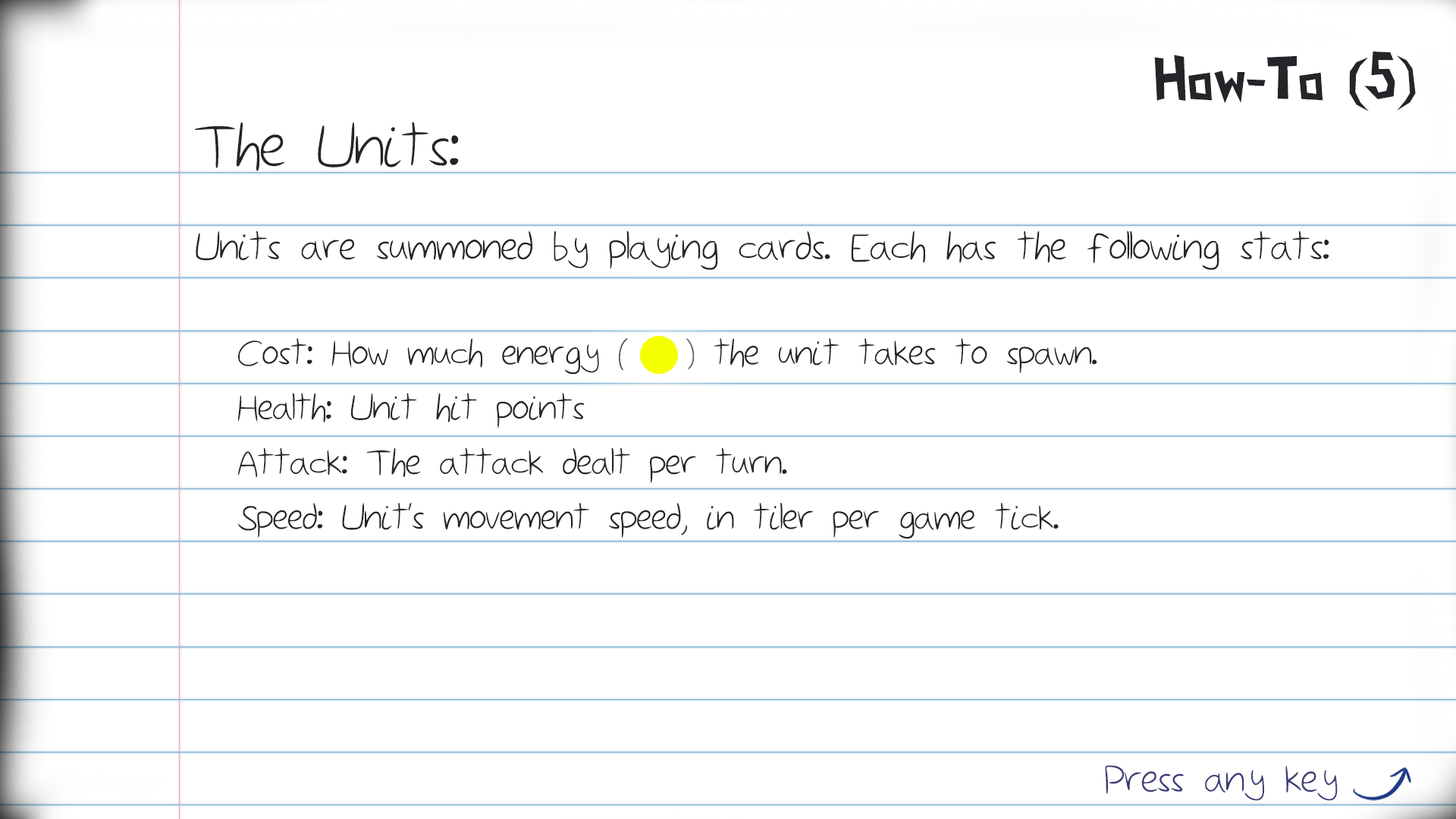
<style>
.page{position:relative;width:1456px;height:819px;background:#ffffff}
.page>*{position:absolute;margin:0}
.t1{font:59.4px "PaperCuts2";color:#242429}
.t2{font:76.9px "Sketchbook";color:#242429}
.t3{font:49.5px "Sketchbook";color:#242429}
.t4{font:45.7px "Sketchbook";color:#242429}
.t5{font:49.5px "Sketchbook";color:#3d3d78}
</style>
<div class="page">
<p class="t1" style="left:1154px;top:52px;width:262px;height:59px">How-To (5)</p>
<p class="t2" style="left:194px;top:122px;width:265px;height:49px">The Units:</p>
<p class="t3" style="left:196px;top:231px;width:1133px;height:39px">Units are summoned by playing cards. Each has the following stats:</p>
<p class="t4" style="left:238px;top:338px;width:859px;height:201px">Cost: How much energy (   ) the unit takes to spawn.<br>Health: Unit hit points<br>Attack: The attack dealt per turn.<br>Speed: Unit’s movement speed, in tiler per game tick.</p>
<p class="t5" style="left:1105px;top:765px;width:233px;height:36px">Press any key</p>
</div>
